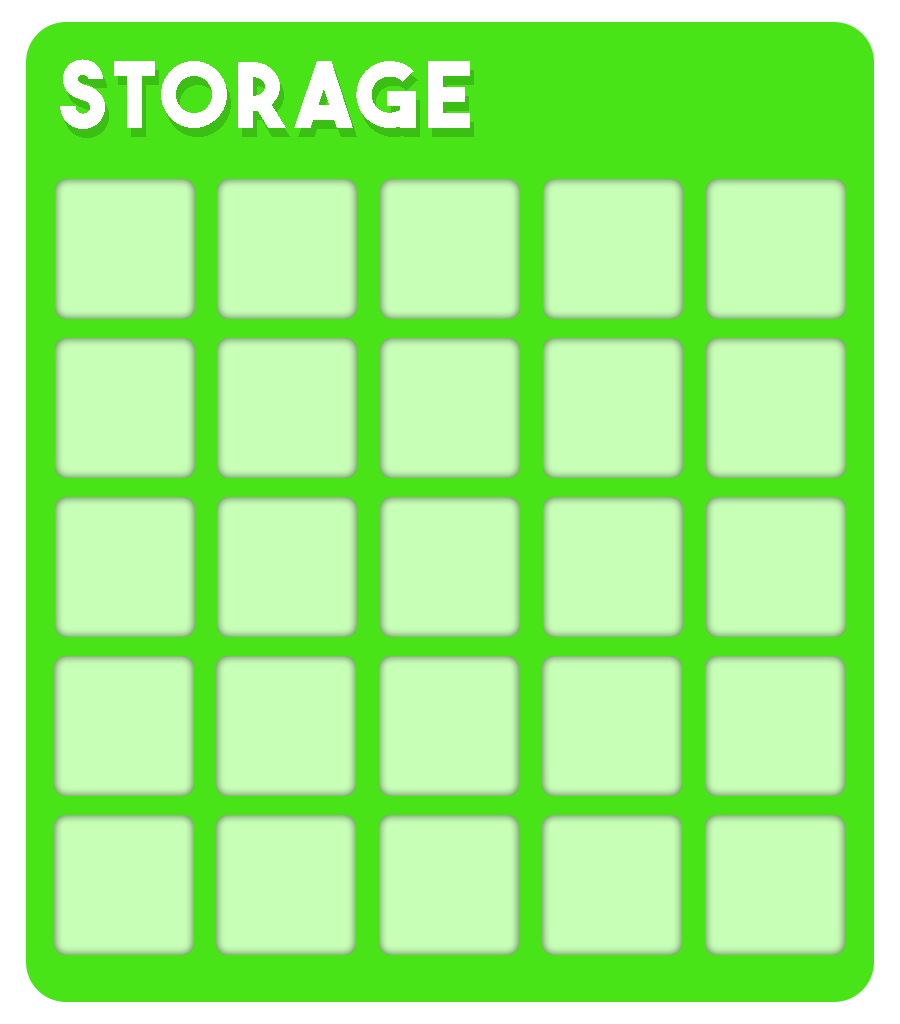
<style>
.page{position:relative;width:900px;height:1024px;background:#c8ffb7}
.page>*{position:absolute;margin:0}
.t1{font:91.3px "TheBoldFont";letter-spacing:0.05em;color:#ffffff}
</style>
<div class="page">
<p class="t1" style="left:60px;top:59px;width:410px;height:70px">Storage</p>
</div>
